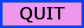
<style>
.page{position:relative;width:84px;height:28px;background:#ee98ed}
.page>*{position:absolute;margin:0}
.t1{font:17px "Verdana";color:#000000;font-weight:bold}
</style>
<div class="page">
<p class="t1" style="left:20px;top:7px;width:45px;height:16px">QUIT</p>
</div>
